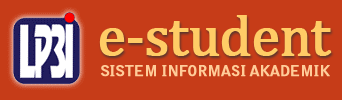
<style>
.page{position:relative;width:342px;height:100px;background:#c63c18}
.page>*{position:absolute;margin:0}
.t1{font:56.8px "CambriaMath";letter-spacing:-0.025em;color:#ffcc66;font-weight:bold}
.t2{font:13.8px "BellGothicStd-Bold";letter-spacing:-0.025em;color:#ffcc99;font-weight:bold;scale:1.09 1}
</style>
<div class="page">
<p class="t1" style="left:99px;top:15px;width:233px;height:41px">e-student</p>
<p class="t2" style="left:100px;top:65px;width:230px;height:12px">SISTEM INFORMASI AKADEMIK</p>
</div>
